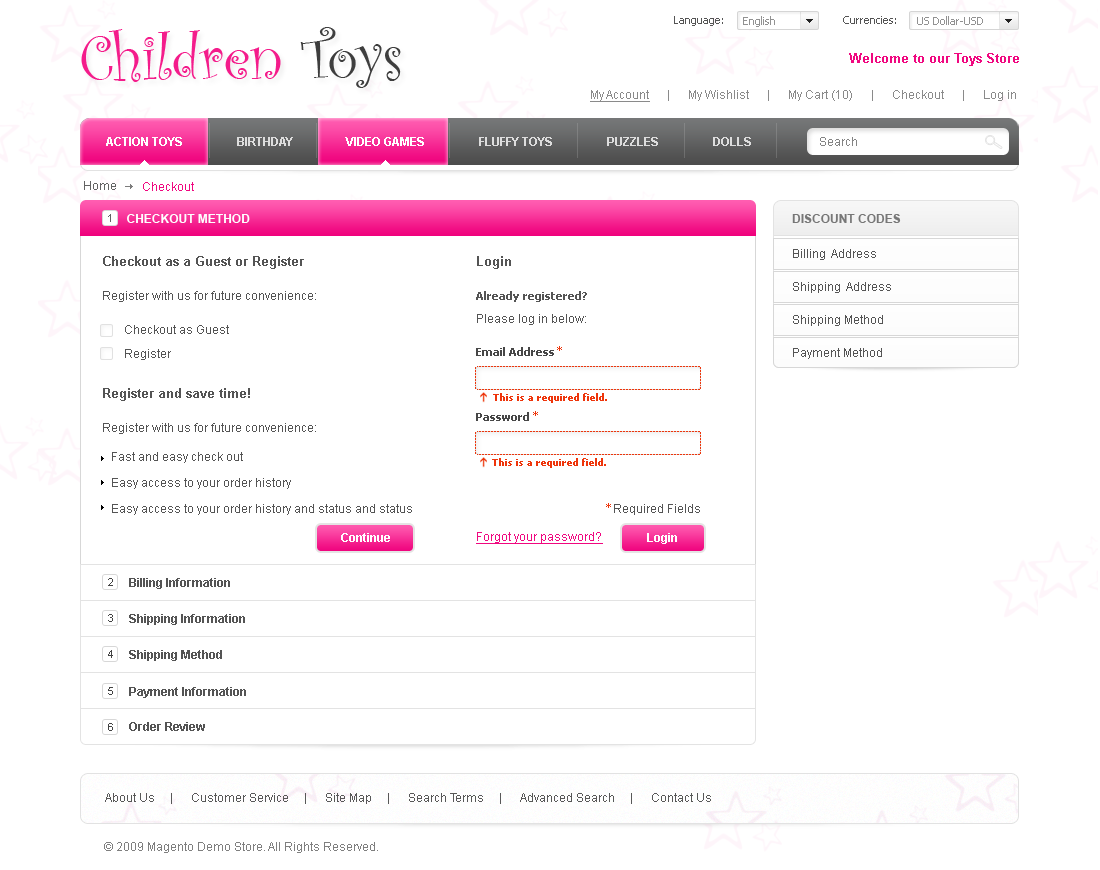
<style>
.page{position:relative;width:1100px;height:870px;background:#ffffff}
.page>*{position:absolute;margin:0}
.t1{font:11px "Tahoma";color:#545454}
.t2{font:11px "Tahoma";color:#929292}
.t3{font:64px "CurlzMT";color:#f41c8b}
.t4{font:64px "CurlzMT";color:#3e3e3e}
.t5{font:13px "Arial-BoldMT";color:#f00880}
.t6{font:12px "ArialMT";color:#8a8a8a}
.t7{font:12px "ArialMT";color:#8a8a8a;text-decoration:underline}
.t8{font:12px "Arial-BoldMT";color:#dddddd;text-transform:uppercase}
.t9{font:12px "Arial-BoldMT";color:#fefefe;text-transform:uppercase}
.t10{font:12px "Arial-BoldMT";color:#ffffff;text-transform:uppercase}
.t11{font:12px "ArialMT";color:#848484}
.t12{font:12px "ArialMT";color:#636363}
.t13{font:12px "ArialMT";color:#f00880}
.t14{font:11px "ArialMT";color:#5f6162}
.t15{font:12px "Arial-BoldMT";color:#777777;text-transform:uppercase}
.t16{font:13px "Arial-BoldMT";color:#545454}
.t17{font:12px "ArialMT";color:#545454}
.t18{font:11px "Tahoma-Bold";color:#545454}
.t19{font:11px "Tahoma-Bold";color:#474747}
.t20{font:11px "Tahoma";color:#ee350b}
.t21{font:10px "Tahoma-Bold";color:#ee350b}
.t22{font:12px/26px "ArialMT";color:#545454}
.t23{font:12px "Arial-BoldMT";color:#ffffff}
.t24{font:12px "ArialMT";color:#f00880;text-decoration:underline}
.t25{font:11px "ArialMT";color:#434343}
.t26{font:12px "Arial-BoldMT";color:#545454}
.t27{font:12px "ArialMT";color:#585858}
.t28{font:12px "ArialMT";color:#7f7f7f}
</style>
<div class="page">
<p class="t1" style="left:674px;top:16px;width:49px;height:10px">Language:</p>
<p class="t2" style="left:743px;top:16px;width:32px;height:11px">English</p>
<p class="t1" style="left:843px;top:16px;width:53px;height:8px">Currencies:</p>
<p class="t2" style="left:917px;top:16px;width:66px;height:9px">US Dollar-USD</p>
<p class="t3" style="left:81px;top:27px;width:320px;height:61px">Children <span class="t4">Toys</span></p>
<p class="t5" style="left:849px;top:53px;width:170px;height:13px">Welcome to our Toys Store</p>
<p class="t6" style="left:590px;top:90px;width:426px;height:12px"><span class="t7">My Account</span>      |      My Wishlist      |      My Cart (10)      |      Checkout      |      Log in</p>
<p class="t8" style="left:106px;top:137px;width:645px;height:9px"><span class="t9">Action toys</span>                  Birthday                <span class="t10">  Video games </span>                 Fluffy toys                  Puzzles                  Dolls</p>
<p class="t11" style="left:820px;top:137px;width:37px;height:9px">Search</p>
<p class="t12" style="left:84px;top:181px;width:32px;height:9px">Home</p>
<p class="t13" style="left:143px;top:182px;width:51px;height:9px">Checkout</p>
<p class="t14" style="left:108px;top:214px;width:3px;height:8px">1</p>
<p class="t9" style="left:127px;top:214px;width:123px;height:9px">Checkout Method</p>
<p class="t15" style="left:792px;top:214px;width:109px;height:9px">Discount Codes</p>
<p class="t16" style="left:103px;top:256px;width:201px;height:13px">Checkout as a Guest or Register</p>
<p class="t16" style="left:477px;top:256px;width:34px;height:13px">Login</p>
<p class="t17" style="left:793px;top:249px;width:83px;height:11px">Billing  Address</p>
<p class="t17" style="left:103px;top:291px;width:213px;height:11px">Register with us for future convenience:</p>
<p class="t18" style="left:476px;top:291px;width:111px;height:11px">Already registered?</p>
<p class="t17" style="left:793px;top:282px;width:98px;height:11px">Shipping  Address</p>
<p class="t17" style="left:477px;top:314px;width:109px;height:11px">Please log in below:</p>
<p class="t17" style="left:793px;top:315px;width:90px;height:11px">Shipping Method</p>
<p class="t17" style="left:125px;top:325px;width:104px;height:9px">Checkout as Guest</p>
<p class="t17" style="left:125px;top:349px;width:46px;height:11px">Register</p>
<p class="t19" style="left:476px;top:347px;width:78px;height:9px">Email Address</p>
<p class="t20" style="left:557px;top:346px;width:5px;height:5px">*</p>
<p class="t17" style="left:793px;top:348px;width:89px;height:11px">Payment Method</p>
<p class="t16" style="left:103px;top:388px;width:147px;height:13px">Register and save time!</p>
<p class="t21" style="left:493px;top:393px;width:114px;height:10px">This is a required field.</p>
<p class="t19" style="left:476px;top:412px;width:53px;height:9px">Password</p>
<p class="t20" style="left:533px;top:411px;width:5px;height:5px">*</p>
<p class="t17" style="left:103px;top:423px;width:213px;height:11px">Register with us for future convenience:</p>
<p class="t22" style="left:112px;top:452px;width:300px;height:63px">Fast and easy check out<br>Easy access to your order history<br>Easy access to your order history and status and status</p>
<p class="t21" style="left:492px;top:458px;width:114px;height:10px">This is a required field.</p>
<p class="t20" style="left:606px;top:503px;width:5px;height:5px">*</p>
<p class="t17" style="left:614px;top:504px;width:86px;height:11px">Required Fields</p>
<p class="t23" style="left:341px;top:533px;width:49px;height:9px">Continue</p>
<p class="t24" style="left:476px;top:532px;width:127px;height:12px">Forgot your password?</p>
<p class="t23" style="left:647px;top:533px;width:30px;height:11px">Login</p>
<p class="t25" style="left:108px;top:578px;width:5px;height:8px">2</p>
<p class="t26" style="left:129px;top:578px;width:101px;height:11px">Billing Information</p>
<p class="t25" style="left:108px;top:614px;width:5px;height:8px">3</p>
<p class="t26" style="left:129px;top:614px;width:116px;height:11px">Shipping Information</p>
<p class="t25" style="left:108px;top:650px;width:5px;height:8px">4</p>
<p class="t26" style="left:129px;top:650px;width:93px;height:11px">Shipping Method</p>
<p class="t25" style="left:108px;top:687px;width:5px;height:8px">5</p>
<p class="t26" style="left:129px;top:687px;width:117px;height:11px">Payment Information</p>
<p class="t25" style="left:108px;top:723px;width:5px;height:8px">6</p>
<p class="t26" style="left:129px;top:722px;width:76px;height:9px">Order Review</p>
<p class="t27" style="left:105px;top:793px;width:606px;height:11px">About Us     |      Customer Service     |      Site Map     |      Search Terms     |      Advanced Search     |      Contact Us</p>
<p class="t28" style="left:104px;top:842px;width:274px;height:11px">© 2009 Magento Demo Store. All Rights Reserved.</p>
</div>
